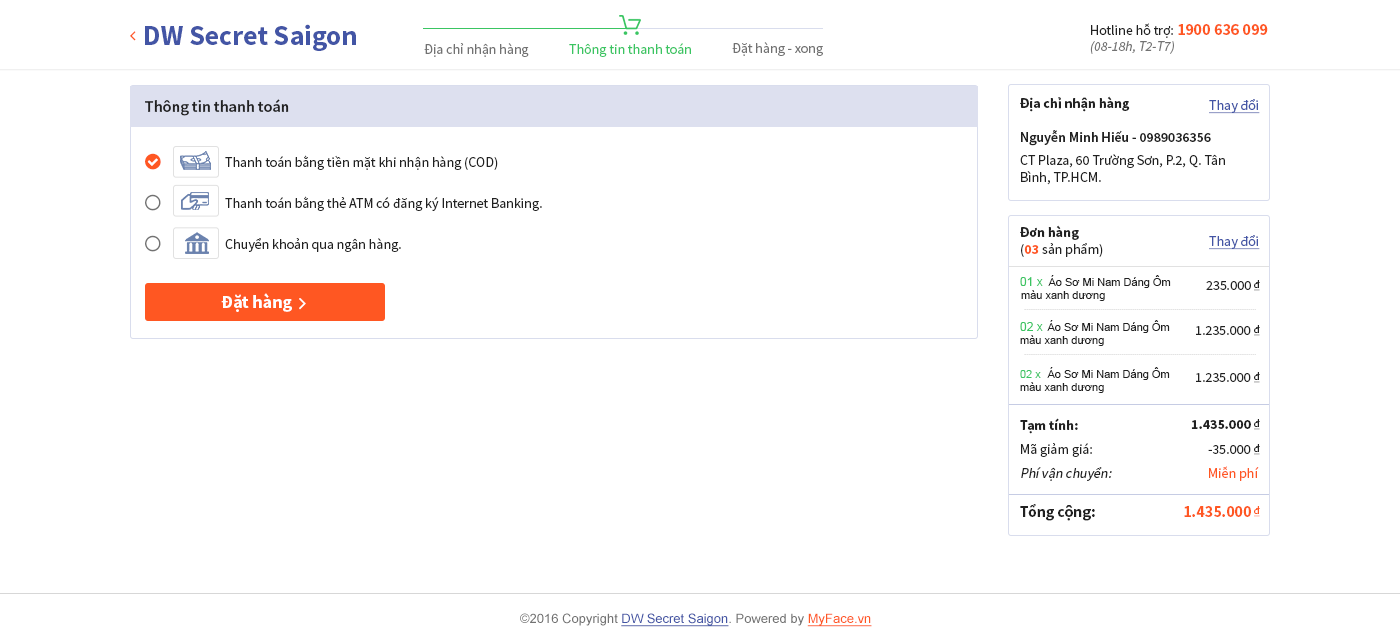
<style>
.page{position:relative;width:1400px;height:644px;background:#ffffff}
.page>*{position:absolute;margin:0}
.t1{font:28px "SourceSansPro-Bold";color:#4355a5}
.t2{font:14px "SourceSansPro-Regular";color:#212121}
.t3{font:16px "SourceSansPro-Bold";color:#ff5722}
.t4{font:14px "SourceSansPro-It";color:#727272}
.t5{font:14px "SourceSansPro-Regular";color:#727272}
.t6{font:14px "SourceSansPro-Regular";color:#3ac562}
.t7{font:16px "SourceSansPro-Semibold";color:#212121}
.t8{font:14px "SourceSansPro-Bold";color:#212121}
.t9{font:14px "SourceSansPro-Regular";color:#4355a5;text-decoration:underline}
.t10{font:14px "SourceSansPro-Semibold";color:#212121}
.t11{font:14px/41px "SourceSansPro-Regular";color:#212121}
.t12{font:14px "SourceSansPro-Bold";color:#ff5722}
.t13{font:12px "ArialMT";color:#3ac562}
.t14{font:11px "ArialMT";color:#212121}
.t15{font:10px "SourceSansPro-Regular";color:#212121;text-decoration:underline}
.t16{font:18px "SourceSansPro-Bold";color:#ffffff}
.t17{font:11px "ArialMT";color:#3ac562}
.t18{font:14px/24px "SourceSansPro-Regular";color:#212121;font-style:italic}
.t19{font:14px/24px "SourceSansPro-Bold";color:#212121}
.t20{font:14px/24px "SourceSansPro-Regular";color:#212121}
.t21{font:14px "SourceSansPro-Regular";color:#ff5722}
.t22{font:16px "SourceSansPro-Bold";color:#212121}
.t23{font:10px "SourceSansPro-Regular";color:#ff5722;text-decoration:underline}
.t24{font:13px "ArialMT";color:#4355a5;text-decoration:underline}
.t25{font:13px "ArialMT";color:#727272}
.t26{font:13px "ArialMT";color:#ff5722;text-decoration:underline}
</style>
<div class="page">
<p class="t1" style="left:145px;top:24px;width:211px;height:27px">DW Secret Saigon</p>
<p class="t2" style="left:1091px;top:23px;width:177px;height:15px">Hotline hỗ trợ: <span class="t3">1900 636 099</span></p>
<p class="t4" style="left:1090px;top:41px;width:84px;height:13px">(08-18h, T2-T7)</p>
<p class="t5" style="left:424px;top:43px;width:105px;height:14px">Địa chỉ nhận hàng</p>
<p class="t6" style="left:569px;top:43px;width:122px;height:14px">Thông tin thanh toán</p>
<p class="t5" style="left:732px;top:42px;width:91px;height:14px">Đặt hàng - xong</p>
<p class="t7" style="left:145px;top:99px;width:144px;height:17px">Thông tin thanh toán</p>
<p class="t8" style="left:1020px;top:96px;width:110px;height:16px">Địa chỉ nhận hàng</p>
<p class="t9" style="left:1209px;top:99px;width:51px;height:15px">Thay đổi</p>
<p class="t10" style="left:1021px;top:130px;width:190px;height:16px">Nguyễn Minh Hiếu - 0989036356</p>
<p class="t11" style="left:225px;top:155px;width:317px;height:97px">Thanh toán bằng tiền mặt khi nhận hàng (COD)<br>Thanh toán bằng thẻ ATM có đăng ký Internet Banking.<br>Chuyển khoản qua ngân hàng.</p>
<p class="t2" style="left:1020px;top:154px;width:205px;height:31px">CT Plaza, 60 Trường Sơn, P.2, Q. Tân Bình, TP.HCM.</p>
<p class="t2" style="left:1020px;top:225px;width:83px;height:32px"><span class="t8">Đơn hàng<br></span>(<span class="t12">03 </span>sản phẩm)</p>
<p class="t9" style="left:1209px;top:235px;width:51px;height:15px">Thay đổi</p>
<p class="t13" style="left:1020px;top:277px;width:23px;height:9px">01 x</p>
<p class="t14" style="left:1021px;top:275px;width:150px;height:26px">Áo Sơ Mi Nam Dáng Ôm màu xanh dương</p>
<p class="t2" style="left:1206px;top:281px;width:45px;height:9px">235.000</p>
<p class="t15" style="left:1254px;top:280px;width:6px;height:11px">đ</p>
<p class="t16" style="left:221px;top:293px;width:71px;height:19px">Đặt hàng</p>
<p class="t14" style="left:1020px;top:320px;width:150px;height:26px">Áo Sơ Mi Nam Dáng Ôm màu xanh dương</p>
<p class="t13" style="left:1020px;top:322px;width:23px;height:9px">02 x</p>
<p class="t2" style="left:1196px;top:326px;width:55px;height:9px">1.235.000</p>
<p class="t15" style="left:1254px;top:325px;width:6px;height:11px">đ</p>
<p class="t14" style="left:1020px;top:367px;width:150px;height:26px">Áo Sơ Mi Nam Dáng Ôm màu xanh dương</p>
<p class="t17" style="left:1020px;top:370px;width:21px;height:8px">02 x</p>
<p class="t2" style="left:1196px;top:373px;width:55px;height:9px">1.235.000</p>
<p class="t15" style="left:1254px;top:372px;width:6px;height:11px">đ</p>
<p class="t18" style="left:1020px;top:418px;width:92px;height:63px"><span class="t19">Tạm tính:<br></span><span class="t20">Mã giảm giá:<br></span>Phí vận chuyển:</p>
<p class="t8" style="left:1191px;top:420px;width:60px;height:9px">1.435.000</p>
<p class="t15" style="left:1254px;top:419px;width:6px;height:11px">đ</p>
<p class="t2" style="left:1208px;top:445px;width:43px;height:9px">-35.000</p>
<p class="t15" style="left:1254px;top:444px;width:6px;height:11px">đ</p>
<p class="t21" style="left:1209px;top:466px;width:50px;height:15px">Miễn phí</p>
<p class="t22" style="left:1020px;top:504px;width:75px;height:17px">Tổng cộng:</p>
<p class="t3" style="left:1184px;top:506px;width:67px;height:11px">1.435.000</p>
<p class="t23" style="left:1254px;top:506px;width:6px;height:11px">đ</p>
<p class="t24" style="left:520px;top:613px;width:352px;height:14px"><span class="t25">©2016 Copyright </span>DW Secret Saigon<span class="t25">. Powered by </span><span class="t26">MyFace.vn</span></p>
</div>
